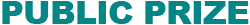
<style>
.page{position:relative;width:250px;height:25px;background:#068587}
.page>*{position:absolute;margin:0}
.t1{font:32px "Arial-Black";letter-spacing:-0.025em;color:#068587;scale:1.03 1}
</style>
<div class="page">
<p class="t1" style="left:2px;top:1px;width:247px;height:23px">PUBLIC PRIZE</p>
</div>
